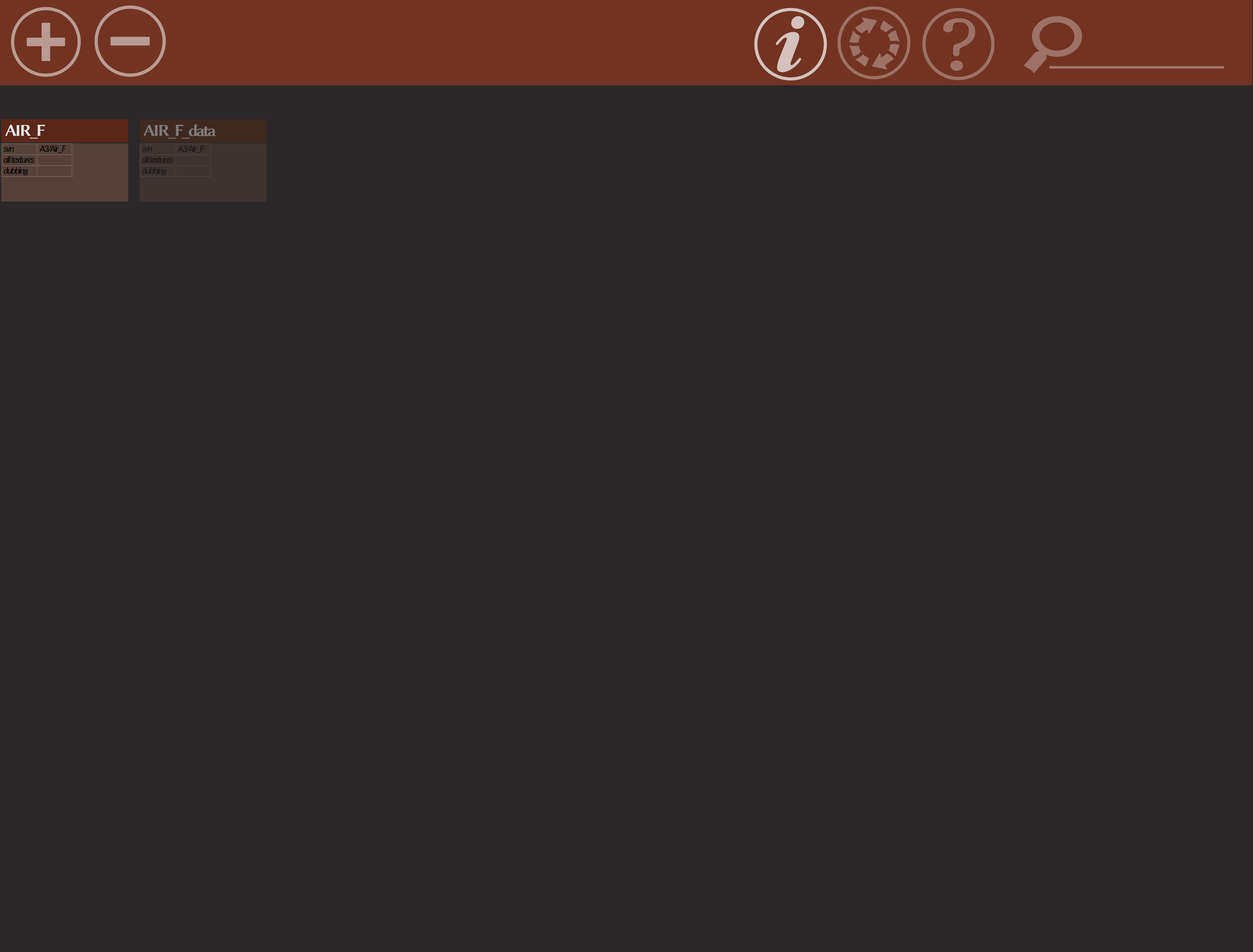
<style>
.page{position:relative;width:1253px;height:952px;background:#2a2828}
.page>*{position:absolute;margin:0}
.t1{font:16.8px "LinuxBiolinumGB";letter-spacing:-0.1em;color:#e5e5e5}
.t2{font:16.8px "LinuxBiolinumGB";letter-spacing:-0.1em;color:#7e7d7d}
.t3{font:9.2px "Carlito-Italic";letter-spacing:-0.1em;color:#000000}
</style>
<div class="page">
<p class="t1" style="left:5px;top:125px;width:40px;height:14px">AIR_F</p>
<p class="t2" style="left:143px;top:124px;width:73px;height:15px">AIR_F_data</p>
<p class="t3" style="left:3px;top:145px;width:63px;height:30px">svn                       A3/Air_F<br>all textures  <br>dubbing</p>
<p class="t3" style="left:142px;top:145px;width:62px;height:30px">svn                       A3/Air_F<br>all textures  <br>dubbing</p>
</div>
